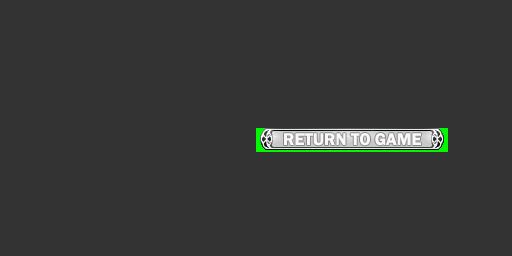
<style>
.page{position:relative;width:512px;height:256px;background:#333333}
.page>*{position:absolute;margin:0}
.t1{font:17.3px "FranklinGothic-Demi";color:#f8f8f8;text-transform:uppercase}
</style>
<div class="page">
<p class="t1" style="left:284px;top:133px;width:137px;height:13px">return to game</p>
</div>
